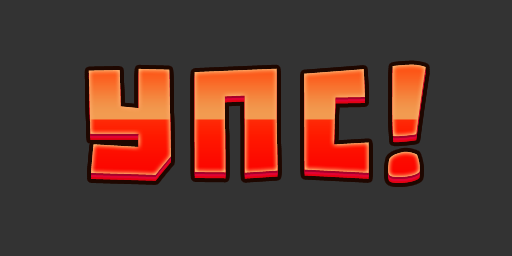
<style>
.page{position:relative;width:512px;height:256px;background:#333333}
.page>*{position:absolute;margin:0}
.t1{font:162.7px "Troika";letter-spacing:0.06em}
.t2{font:112px "Supercell-Magic";letter-spacing:0.06em}
</style>
<div class="page">
<p class="t1" style="left:88px;top:64px;width:338px;height:113px">УПС<span class="t2">!</span></p>
</div>
